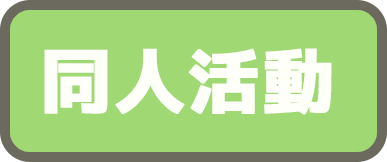
<style>
.page{position:relative;width:387px;height:162px;background:#a0d873}
.page>*{position:absolute;margin:0}
.t1{font:72px "07LightNovelPOP";color:#fefff9;font-weight:bold}
</style>
<div class="page">
<p class="t1" style="left:44px;top:48px;width:288px;height:67px">同人活動</p>
</div>
